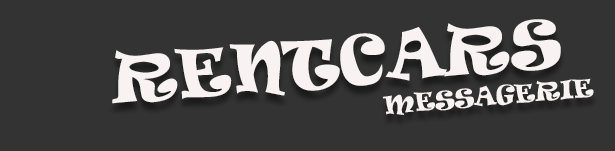
<style>
.page{position:relative;width:615px;height:151px;background:#333333}
.page>*{position:absolute;margin:0}
.t1{font:24px/33px "Ravie";color:#f8f2f2;text-transform:uppercase}
.t2{font:29px/59px "Ravie";color:#f8f2f2;text-transform:uppercase}
.t3{font:63.3px/56px "Ravie";color:#f8f2f2;text-transform:uppercase}
</style>
<div class="page">
<p class="t1" style="left:112px;top:19px;width:482px;height:96px;text-align:center;rotate:-5deg"><span class="t2">                   </span><span class="t3"><br>   RENTCARS</span> <br>                                         MESSAgerie</p>
</div>
